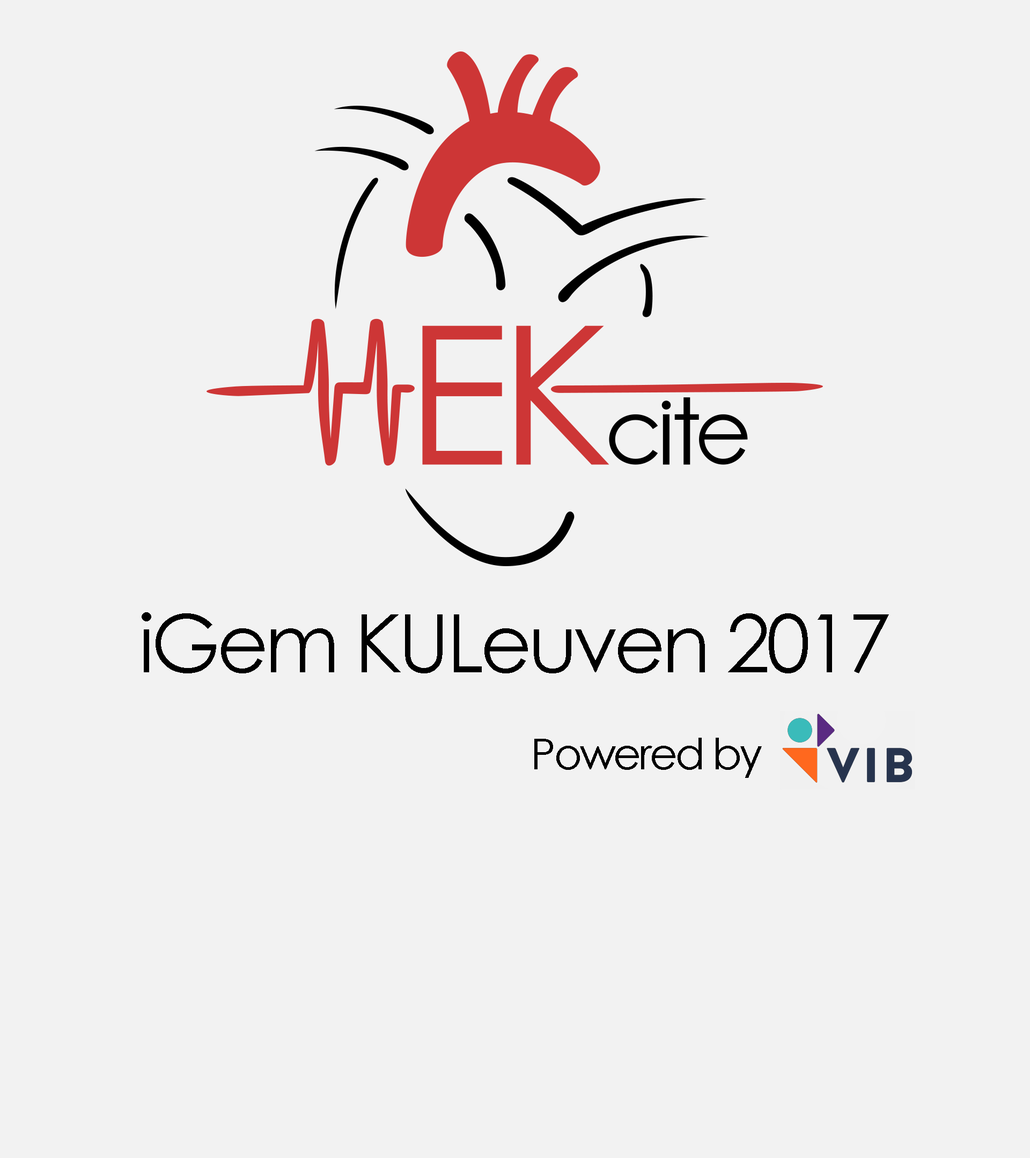
<style>
.page{position:relative;width:1030px;height:1158px;background:#f2f2f2}
.page>*{position:absolute;margin:0}
.t1{font:80.4px "CenturyGothic";letter-spacing:-0.05em;color:#000000}
.t2{font:42.9px "CenturyGothic";letter-spacing:-0.05em;color:#000000}
</style>
<div class="page">
<p class="t1" style="left:142px;top:612px;width:747px;height:61px">iGem KULeuven 2017</p>
<p class="t2" style="left:534px;top:738px;width:227px;height:40px">Powered by</p>
</div>
